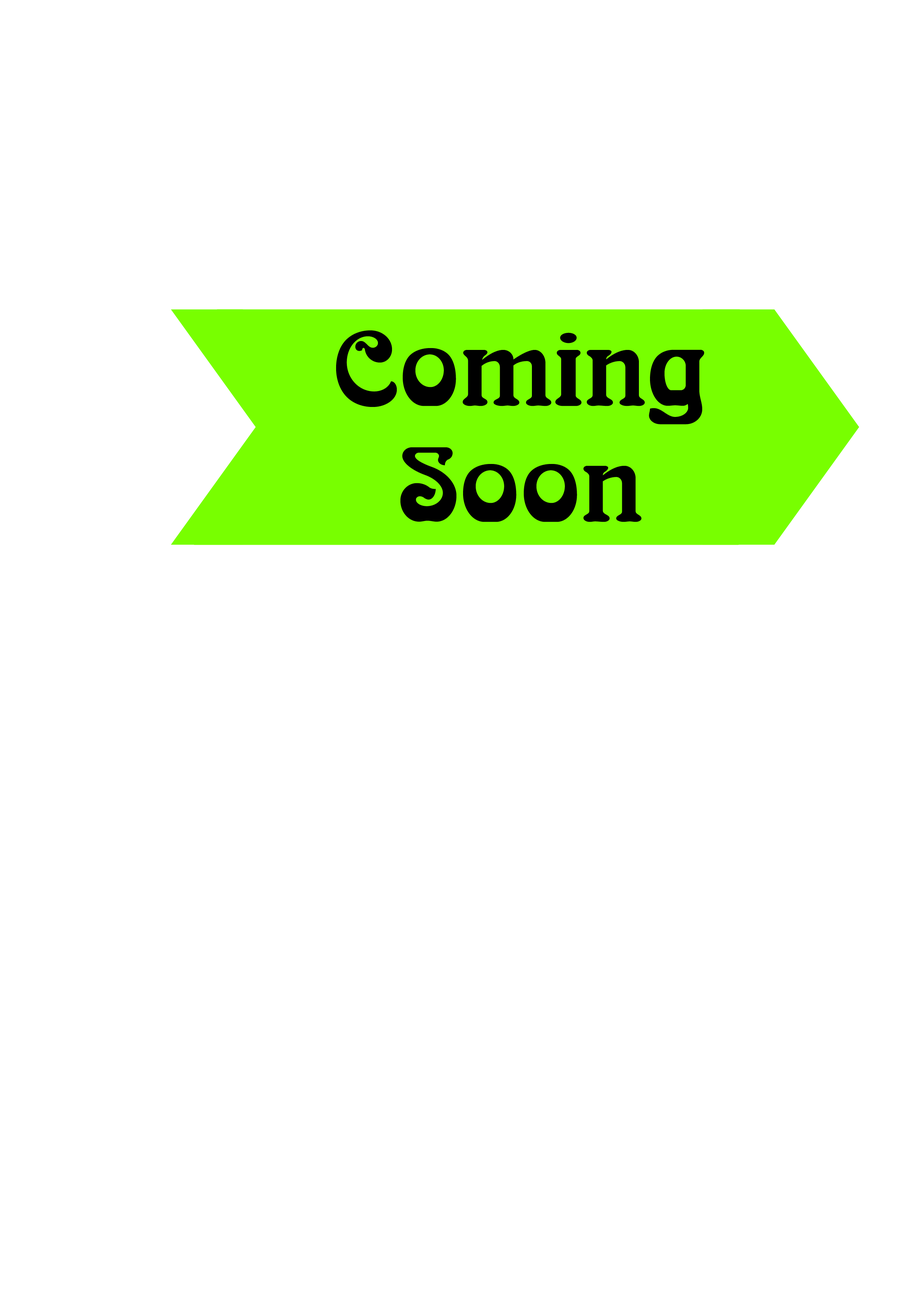
<style>
.page{position:relative;width:918px;height:1299px;background:#ffffff}
.page>*{position:absolute;margin:0}
.t1{font:96.5px "SHREE050";color:#000000}
</style>
<div class="page">
<p class="t1" style="left:336px;top:330px;width:369px;height:192px;text-align:center">Coming<br>Soon</p>
</div>
